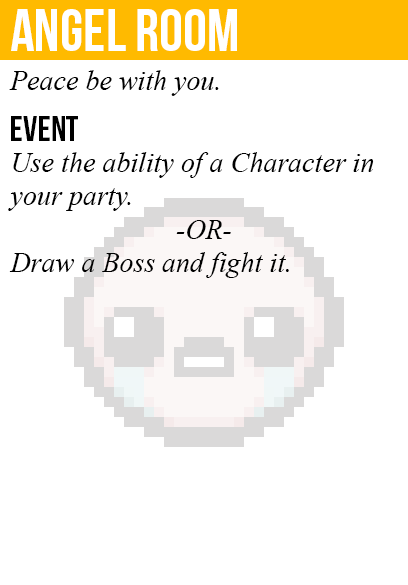
<style>
.page{position:relative;width:408px;height:585px;background:#ffffff}
.page>*{position:absolute;margin:0}
.t1{font:60px "BebasNeue";color:#ffffff}
.t2{font:28px "TimesNewRomanPS-ItalicMT";color:#000000}
.t3{font:36px "BebasNeue";color:#000000}
</style>
<div class="page">
<p class="t1" style="left:11px;top:9px;width:226px;height:42px">angel room</p>
<p class="t2" style="left:9px;top:70px;width:210px;height:26px">Peace be with you.</p>
<p class="t3" style="left:11px;top:116px;width:67px;height:25px">event</p>
<p class="t2" style="left:8px;top:152px;width:366px;height:126px">Use the ability of a Character in<br>your party.<br><br>Draw a Boss and fight it.</p>
<p class="t2" style="left:176px;top:220px;width:55px;height:19px">-OR-</p>
</div>
